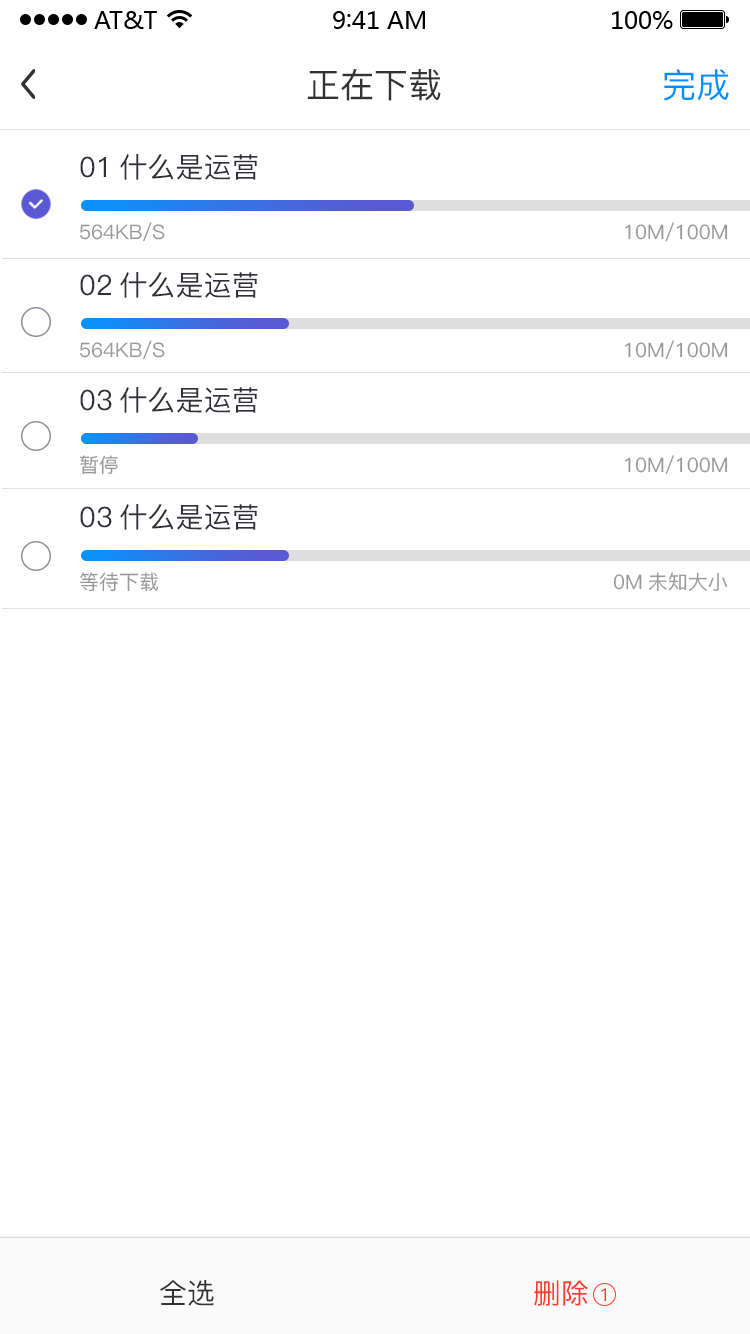
<style>
.page{position:relative;width:750px;height:1334px;background:#ffffff}
.page>*{position:absolute;margin:0}
.t1{font:34px "PingFang-SC-Medium";color:#333333}
.t2{font:34px "PingFang-SC-Medium";color:#0090ff}
.t3{font:28px "PingFang-SC-Medium";color:#2e313a}
.t4{font:20px "PingFang-SC-Medium";color:#999999}
.t5{font:28px "PingFang-SC-Medium";color:#333333}
.t6{font:28px "PingFang-SC-Medium";color:#ff3b30}
.t7{font:18px "PingFang-SC-Medium";color:#ff3b30}
</style>
<div class="page">
<p class="t1" style="left:307px;top:69px;width:134px;height:32px">正在下载</p>
<p class="t2" style="left:663px;top:69px;width:66px;height:32px">完成</p>
<p class="t3" style="left:80px;top:154px;width:178px;height:26px">01什么是运营</p>
<p class="t4" style="left:80px;top:222px;width:85px;height:20px">564KB/S</p>
<p class="t4" style="left:625px;top:222px;width:103px;height:20px">10M/100M</p>
<p class="t3" style="left:80px;top:272px;width:178px;height:26px">02什么是运营</p>
<p class="t4" style="left:80px;top:340px;width:85px;height:20px">564KB/S</p>
<p class="t4" style="left:625px;top:340px;width:103px;height:20px">10M/100M</p>
<p class="t3" style="left:80px;top:387px;width:178px;height:26px">03什么是运营</p>
<p class="t4" style="left:80px;top:455px;width:38px;height:20px">暂停</p>
<p class="t4" style="left:625px;top:455px;width:103px;height:20px">10M/100M</p>
<p class="t3" style="left:80px;top:504px;width:178px;height:26px">03什么是运营</p>
<p class="t4" style="left:80px;top:572px;width:79px;height:20px">等待下载</p>
<p class="t4" style="left:613px;top:572px;width:114px;height:20px">0M未知大小</p>
<p class="t5" style="left:160px;top:1280px;width:54px;height:26px">全选</p>
<p class="t6" style="left:534px;top:1280px;width:54px;height:26px">删除</p>
<p class="t7" style="left:601px;top:1288px;width:6px;height:14px">1</p>
</div>
